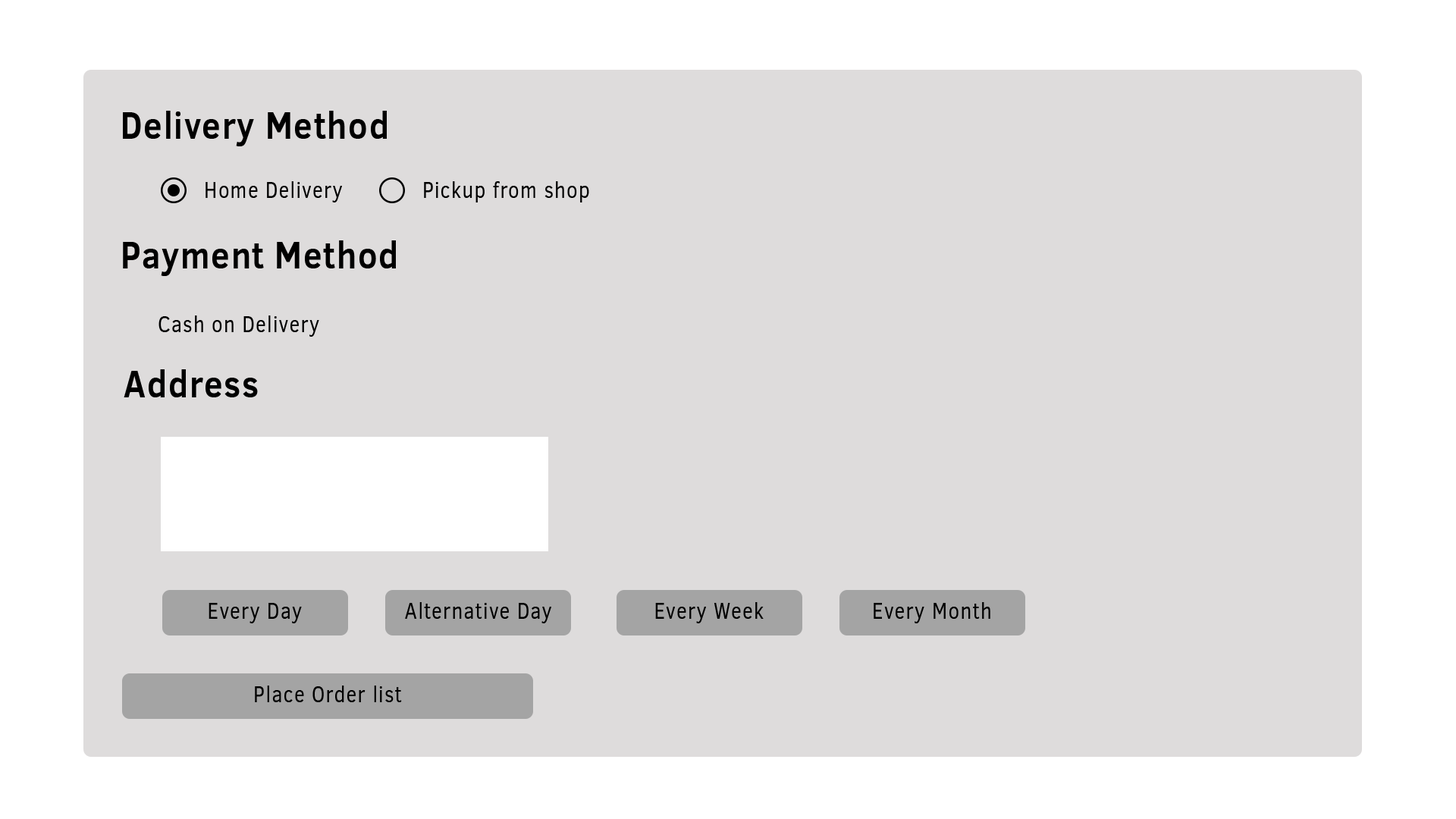
<style>
.page{position:relative;width:1456px;height:819px;background:#dedcdc}
.page>*{position:absolute;margin:0}
.t1{font:37.9px "ClearSans-Bold";letter-spacing:0.04em;color:#000000;scale:0.88 1}
.t2{font:22.7px "ClearSans";letter-spacing:0.04em;color:#000000;scale:0.88 1}
</style>
<div class="page">
<p class="t1" style="left:123px;top:111px;width:264px;height:35px">Delivery Method</p>
<p class="t2" style="left:206px;top:181px;width:136px;height:21px">Home Delivery</p>
<p class="t2" style="left:424px;top:181px;width:165px;height:21px">Pickup from shop</p>
<p class="t1" style="left:123px;top:240px;width:273px;height:36px">Payment Method</p>
<p class="t2" style="left:158px;top:315px;width:161px;height:22px">Cash on Delivery</p>
<p class="t1" style="left:124px;top:369px;width:134px;height:28px">Address</p>
<p class="t2" style="left:209px;top:603px;width:93px;height:20px">Every Day</p>
<p class="t2" style="left:405px;top:602px;width:146px;height:21px">Alternative Day</p>
<p class="t2" style="left:655px;top:602px;width:109px;height:21px">Every Week</p>
<p class="t2" style="left:874px;top:602px;width:116px;height:21px">Every Month</p>
<p class="t2" style="left:255px;top:686px;width:147px;height:16px">Place Order list</p>
</div>
